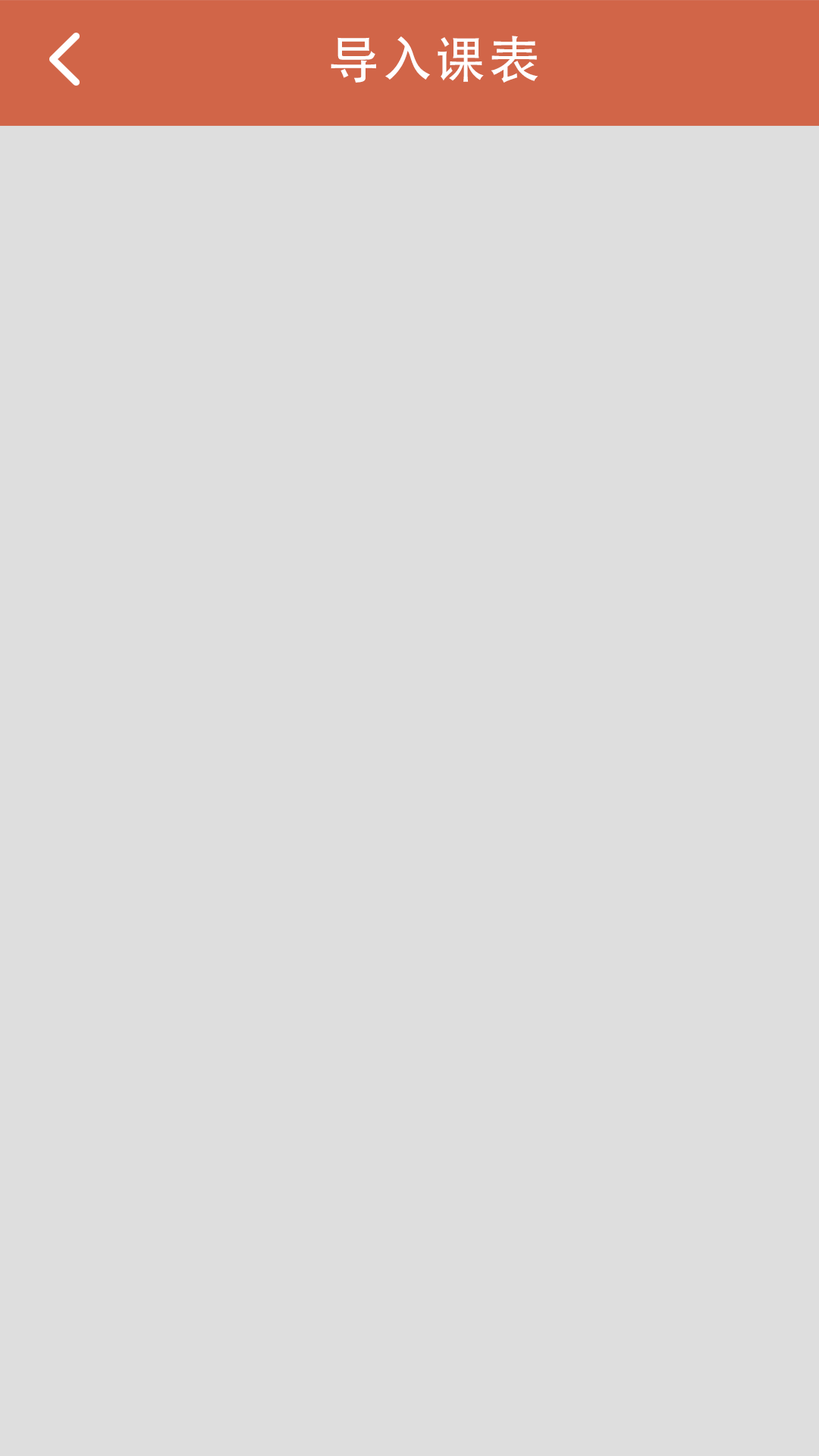
<style>
.page{position:relative;width:819px;height:1456px;background:#dedede}
.page>*{position:absolute;margin:0}
.t1{font:50.8px "AdobeHeitiStd-Regular";letter-spacing:0.06em;color:#ffffff}
</style>
<div class="page">
<p class="t1" style="left:331px;top:36px;width:207px;height:47px">导入课表</p>
</div>
